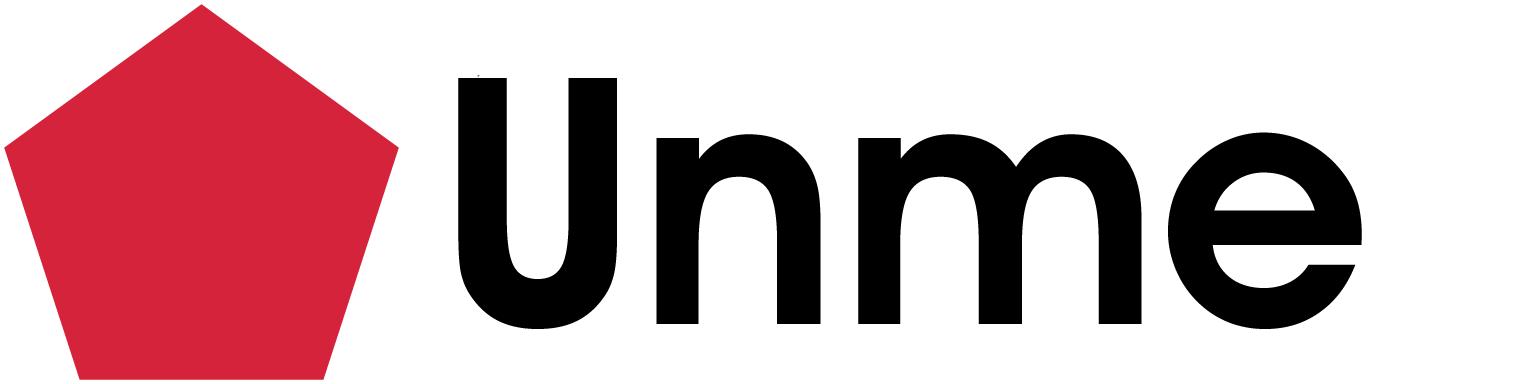
<style>
.page{position:relative;width:1530px;height:384px;background:#ffffff}
.page>*{position:absolute;margin:0}
.t1{font:345.8px "AvantGardeITCbyBT-Demi";color:#000000}
</style>
<div class="page">
<p class="t1" style="left:458px;top:78px;width:904px;height:251px">Unme</p>
</div>
